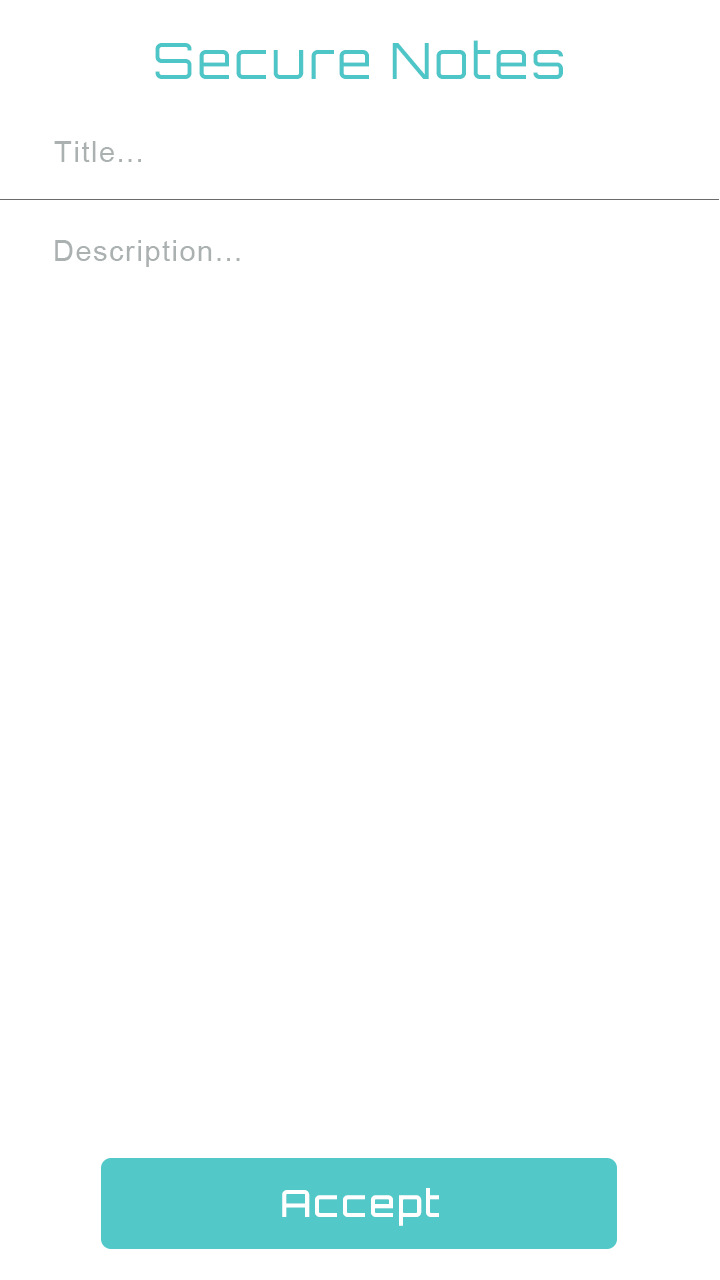
<style>
.page{position:relative;width:720px;height:1280px;background:#ffffff}
.page>*{position:absolute;margin:0}
.t1{font:50px "Orbitron-Regular";letter-spacing:0.05em;color:#4ec6c8}
.t2{font:29.2px "ArialMT";letter-spacing:0.05em;color:#abb0b0}
.t3{font:37.5px "Orbitron-Medium";letter-spacing:0.05em;color:#ffffff}
</style>
<div class="page">
<p class="t1" style="left:155px;top:40px;width:408px;height:39px">Secure Notes</p>
<p class="t2" style="left:54px;top:141px;width:87px;height:21px">Title...</p>
<p class="t2" style="left:55px;top:240px;width:185px;height:27px">Description...</p>
<p class="t3" style="left:282px;top:1188px;width:157px;height:38px">Accept</p>
</div>
